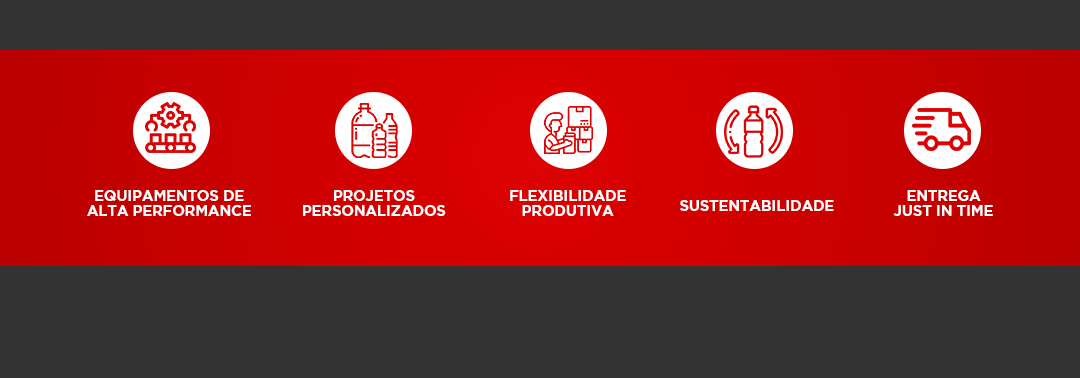
<style>
.page{position:relative;width:1080px;height:378px;background:#333333}
.page>*{position:absolute;margin:0}
.t1{font:14.7px/15px "Gotham-Bold";letter-spacing:-0.01em;color:#ffffff;text-transform:uppercase}
.t2{font:14.6px/14.9px "Gotham-Bold";letter-spacing:-0.01em;color:#ffffff;text-transform:uppercase}
.t3{font:14.6px "Gotham-Bold";letter-spacing:-0.01em;color:#ffffff;text-transform:uppercase}
</style>
<div class="page">
<p class="t1" style="left:87px;top:190px;width:164px;height:26px;text-align:center">equipamentos de<br>alta performance</p>
<p class="t1" style="left:303px;top:190px;width:143px;height:26px;text-align:center">projetos<br>personalizados</p>
<p class="t1" style="left:510px;top:190px;width:116px;height:26px;text-align:center">FLEXIBILIDADE<br>PRODUTIVA</p>
<p class="t2" style="left:893px;top:190px;width:100px;height:26px;text-align:center">entrega<br>JUST IN TIME</p>
<p class="t3" style="left:680px;top:200px;width:154px;height:11px">sustentabilidade</p>
</div>
